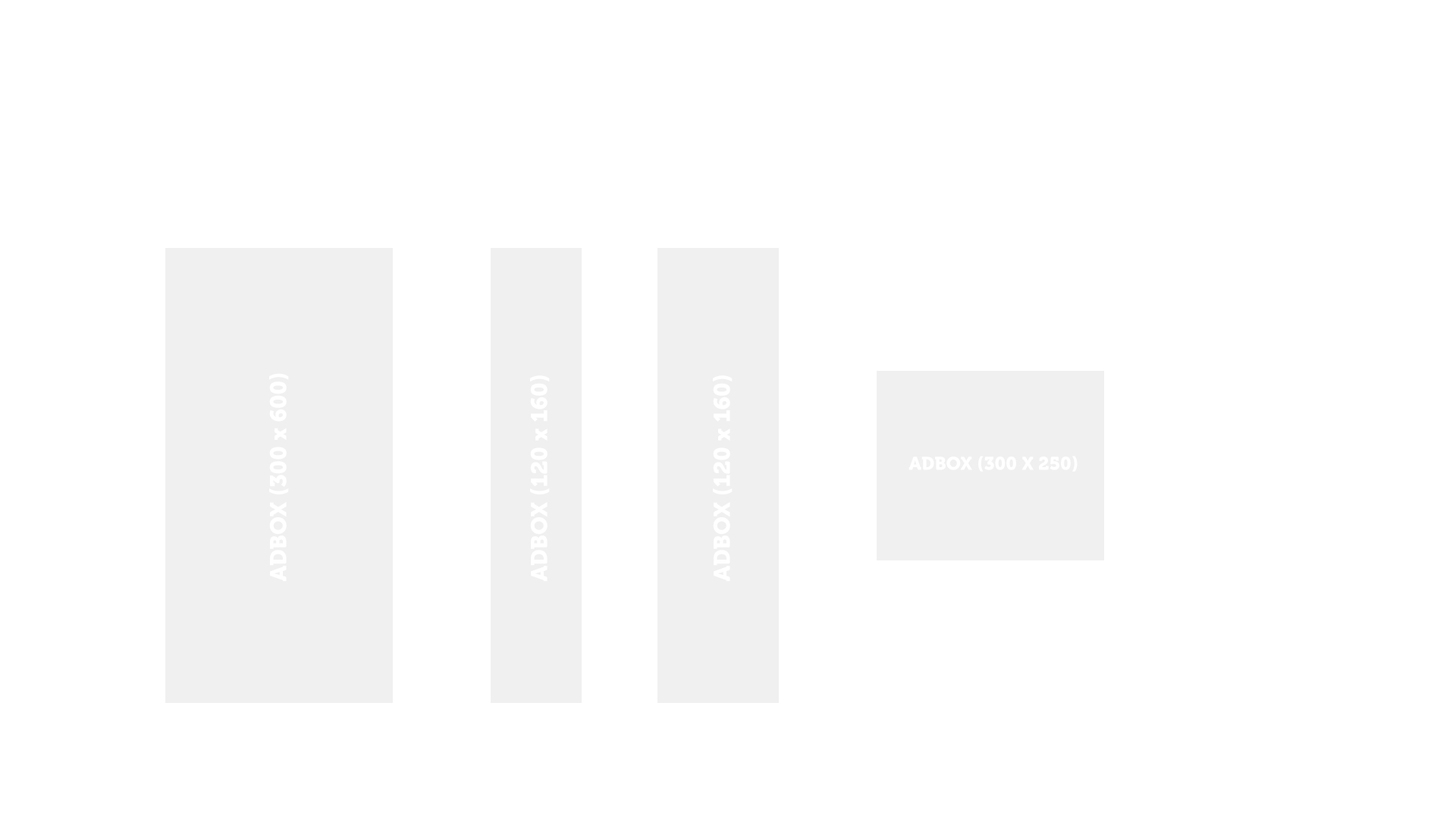
<style>
.page{position:relative;width:1456px;height:819px;background:#ffffff}
.page>*{position:absolute;margin:0}
.t1{font:22.7px "Museo900-Regular";color:#ffffff}
.t2{font:18.2px "Museo900-Regular";color:#ffffff}
</style>
<div class="page">
<p class="t1" style="left:269px;top:373px;width:20px;height:209px;rotate:-90deg">ADBOX (300 x 600)</p>
<p class="t1" style="left:530px;top:375px;width:20px;height:207px;rotate:-90deg">ADBOX (120 x 160)</p>
<p class="t1" style="left:713px;top:375px;width:20px;height:207px;rotate:-90deg">ADBOX (120 x 160)</p>
<p class="t2" style="left:908px;top:456px;width:170px;height:16px">ADBOX (300 X 250)</p>
</div>
